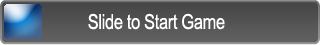
<style>
.page{position:relative;width:320px;height:45px}
.page>*{position:absolute;margin:0}
.t1{font:20.5px "ArialUnicodeMS";letter-spacing:-0.02em;color:#ffffff;scale:0.8 1}
</style>
<div class="page">
<p class="t1" style="left:88px;top:13px;width:137px;height:17px">Slide to Start Game</p>
</div>
